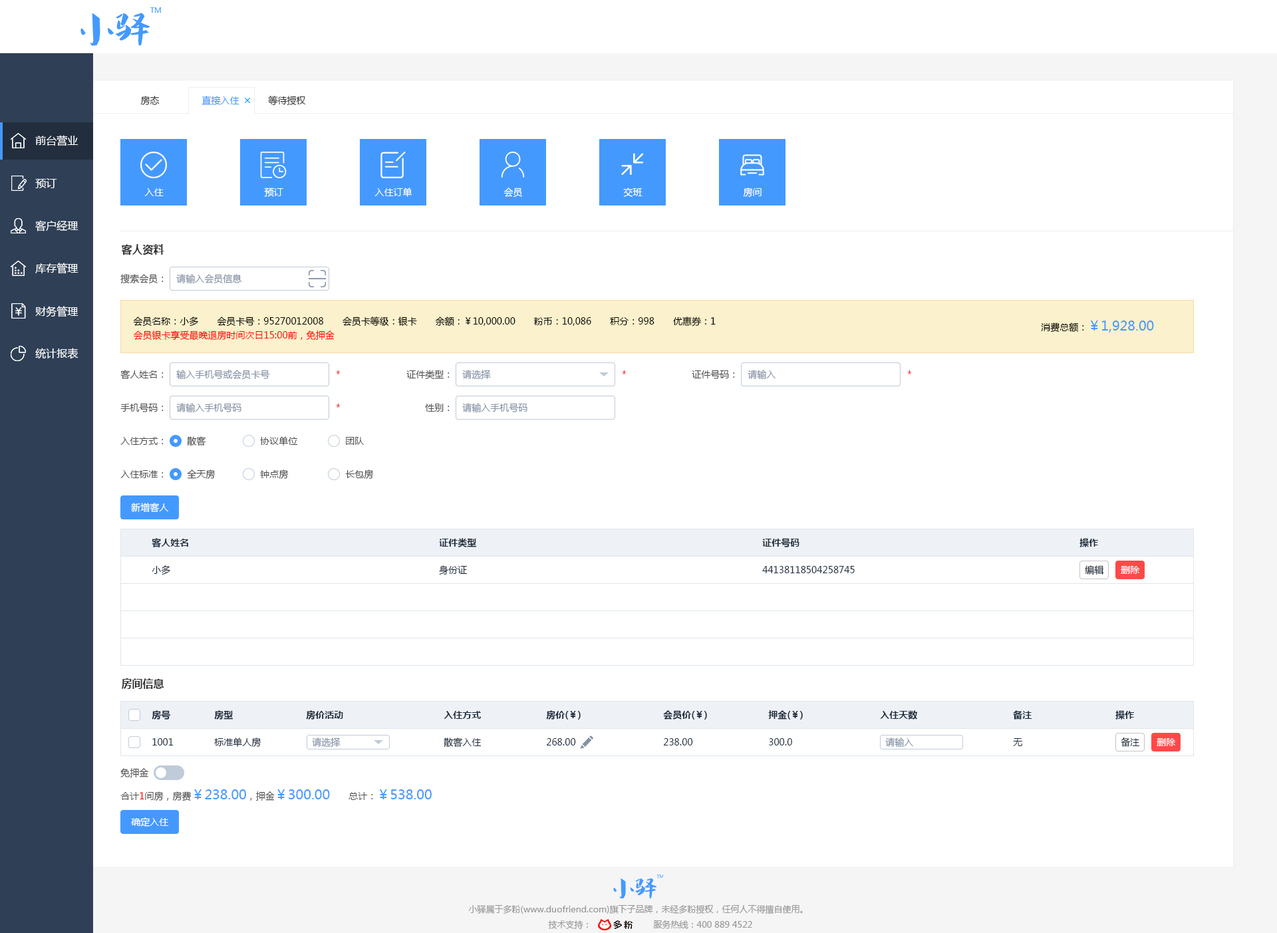
<style>
.page{position:relative;width:1277px;height:933px;background:#ffffff}
.page>*{position:absolute;margin:0}
.t1{font:9.3px "MicrosoftYaHei";color:#333333}
.t2{font:9.3px "MicrosoftYaHei";color:#4499ff}
.t3{font:10.6px "MicrosoftYaHei";color:#ffffff}
.t4{font:9.3px "MicrosoftYaHei";color:#ffffff}
.t5{font:10.6px "MicrosoftYaHei-Bold";color:#333333}
.t6{font:9.3px "MicrosoftYaHei";color:#505050}
.t7{font:9.3px "MicrosoftYaHei";color:#8391a5}
.t8{font:9.3px "MicrosoftYaHei";color:#000000}
.t9{font:13.3px "MicrosoftYaHei";color:#4499ff}
.t10{font:9.3px "MicrosoftYaHei";color:#ff0000}
.t11{font:9.3px "MicrosoftYaHei-Bold";color:#1f2d3d}
.t12{font:9.3px "MicrosoftYaHei";color:#1f2d3d}
.t13{font:8.6px "MicrosoftYaHei";color:#999999}
</style>
<div class="page">
<p class="t1" style="left:140px;top:96px;width:20px;height:9px">房态</p>
<p class="t2" style="left:202px;top:96px;width:38px;height:9px">直接入住</p>
<p class="t1" style="left:268px;top:96px;width:38px;height:10px">等待授权</p>
<p class="t3" style="left:35px;top:135px;width:44px;height:11px">前台营业</p>
<p class="t3" style="left:35px;top:178px;width:22px;height:10px">预订</p>
<p class="t4" style="left:144px;top:188px;width:20px;height:8px">入住</p>
<p class="t4" style="left:264px;top:188px;width:19px;height:9px">预订</p>
<p class="t4" style="left:375px;top:188px;width:38px;height:9px">入住订单</p>
<p class="t4" style="left:504px;top:188px;width:18px;height:10px">会员</p>
<p class="t4" style="left:623px;top:188px;width:20px;height:9px">交班</p>
<p class="t4" style="left:743px;top:188px;width:19px;height:9px">房间</p>
<p class="t3" style="left:35px;top:220px;width:44px;height:12px">客户经理</p>
<p class="t5" style="left:121px;top:244px;width:43px;height:11px">客人资料</p>
<p class="t3" style="left:35px;top:263px;width:44px;height:11px">库存管理</p>
<p class="t6" style="left:120px;top:274px;width:44px;height:10px">搜索会员：</p>
<p class="t7" style="left:176px;top:274px;width:66px;height:10px">请输入会员信息</p>
<p class="t3" style="left:35px;top:306px;width:44px;height:11px">财务管理</p>
<p class="t8" style="left:133px;top:317px;width:583px;height:10px">会员名称：小多　　会员卡号：95270012008　　会员卡等级：银卡　　余额：￥10,000.00　　粉币：10,086　　积分：998　　优惠券：1</p>
<p class="t9" style="left:1041px;top:321px;width:113px;height:12px"><span class="t8">消费总额：</span>￥1,928.00</p>
<p class="t10" style="left:134px;top:331px;width:201px;height:10px">会员银卡享受最晚退房时间次日15:00前，免押金</p>
<p class="t3" style="left:35px;top:348px;width:44px;height:11px">统计报表</p>
<p class="t6" style="left:120px;top:370px;width:44px;height:9px">客人姓名：</p>
<p class="t7" style="left:176px;top:370px;width:94px;height:10px">输入手机号或会员卡号</p>
<p class="t10" style="left:336px;top:371px;width:4px;height:4px">*</p>
<p class="t6" style="left:407px;top:370px;width:43px;height:10px">证件类型：</p>
<p class="t7" style="left:462px;top:370px;width:29px;height:9px">请选择</p>
<p class="t10" style="left:622px;top:371px;width:4px;height:4px">*</p>
<p class="t6" style="left:692px;top:370px;width:43px;height:9px">证件号码：</p>
<p class="t7" style="left:748px;top:370px;width:28px;height:10px">请输入</p>
<p class="t10" style="left:908px;top:371px;width:4px;height:4px">*</p>
<p class="t6" style="left:120px;top:403px;width:44px;height:10px">手机号码：</p>
<p class="t7" style="left:176px;top:403px;width:66px;height:10px">请输入手机号码</p>
<p class="t10" style="left:336px;top:404px;width:4px;height:4px">*</p>
<p class="t6" style="left:425px;top:404px;width:25px;height:8px">性别：</p>
<p class="t7" style="left:462px;top:403px;width:66px;height:10px">请输入手机号码</p>
<p class="t6" style="left:120px;top:437px;width:44px;height:8px">入住方式：</p>
<p class="t6" style="left:187px;top:436px;width:19px;height:10px">散客</p>
<p class="t6" style="left:260px;top:436px;width:38px;height:10px">协议单位</p>
<p class="t6" style="left:346px;top:437px;width:19px;height:8px">团队</p>
<p class="t6" style="left:120px;top:470px;width:44px;height:8px">入住标准：</p>
<p class="t6" style="left:187px;top:470px;width:29px;height:10px">全天房</p>
<p class="t6" style="left:260px;top:470px;width:29px;height:10px">钟点房</p>
<p class="t6" style="left:345px;top:470px;width:29px;height:10px">长包房</p>
<p class="t4" style="left:131px;top:503px;width:38px;height:9px">新增客人</p>
<p class="t11" style="left:152px;top:538px;width:36px;height:10px">客人姓名</p>
<p class="t11" style="left:439px;top:538px;width:37px;height:10px">证件类型</p>
<p class="t11" style="left:762px;top:538px;width:38px;height:10px">证件号码</p>
<p class="t11" style="left:1080px;top:538px;width:18px;height:10px">操作</p>
<p class="t12" style="left:152px;top:566px;width:18px;height:10px">小多</p>
<p class="t12" style="left:439px;top:566px;width:29px;height:10px">身份证</p>
<p class="t12" style="left:762px;top:566px;width:93px;height:8px">44138118504258745</p>
<p class="t12" style="left:1085px;top:566px;width:19px;height:9px">编辑</p>
<p class="t4" style="left:1121px;top:566px;width:19px;height:8px">删除</p>
<p class="t5" style="left:121px;top:679px;width:43px;height:10px">房间信息</p>
<p class="t11" style="left:152px;top:711px;width:18px;height:9px">房号</p>
<p class="t11" style="left:214px;top:711px;width:19px;height:9px">房型</p>
<p class="t11" style="left:306px;top:711px;width:37px;height:9px">房价活动</p>
<p class="t11" style="left:444px;top:711px;width:37px;height:8px">入住方式</p>
<p class="t11" style="left:546px;top:711px;width:35px;height:9px">房价(￥)</p>
<p class="t11" style="left:663px;top:711px;width:44px;height:9px">会员价(￥)</p>
<p class="t11" style="left:768px;top:711px;width:35px;height:9px">押金(￥)</p>
<p class="t11" style="left:880px;top:711px;width:37px;height:9px">入住天数</p>
<p class="t11" style="left:1013px;top:711px;width:20px;height:9px">备注</p>
<p class="t11" style="left:1116px;top:711px;width:18px;height:9px">操作</p>
<p class="t12" style="left:214px;top:738px;width:47px;height:10px">标准单人房</p>
<p class="t7" style="left:312px;top:738px;width:29px;height:9px">请选择</p>
<p class="t12" style="left:444px;top:738px;width:38px;height:10px">散客入住</p>
<p class="t7" style="left:886px;top:738px;width:28px;height:10px">请输入</p>
<p class="t12" style="left:1121px;top:738px;width:19px;height:9px">备注</p>
<p class="t12" style="left:152px;top:739px;width:22px;height:7px">1001</p>
<p class="t12" style="left:546px;top:739px;width:30px;height:7px">268.00</p>
<p class="t12" style="left:663px;top:739px;width:30px;height:7px">238.00</p>
<p class="t12" style="left:769px;top:739px;width:23px;height:7px">300.0</p>
<p class="t12" style="left:1013px;top:739px;width:10px;height:8px">无</p>
<p class="t4" style="left:1157px;top:739px;width:19px;height:8px">删除</p>
<p class="t6" style="left:120px;top:768px;width:28px;height:10px">免押金</p>
<p class="t9" style="left:120px;top:790px;width:312px;height:12px"><span class="t6">合计</span><span class="t10">1</span><span class="t6">间房，房费</span>￥238.00<span class="t6">，押金</span>￥300.00<span class="t6">　　总计：</span>￥538.00</p>
<p class="t4" style="left:131px;top:818px;width:38px;height:9px">确定入住</p>
<p class="t13" style="left:468px;top:905px;width:335px;height:9px">小驿属于多粉(www.duofriend.com)旗下子品牌，未经多粉授权，任何人不得擅自使用。</p>
<p class="t13" style="left:548px;top:921px;width:40px;height:8px">技术支持：</p>
<p class="t13" style="left:653px;top:921px;width:99px;height:8px">服务热线：400 889 4522</p>
</div>
